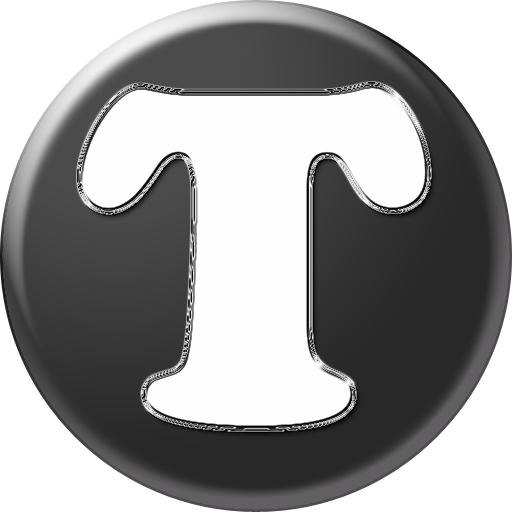
<style>
.page{position:relative;width:512px;height:512px;background:#fefefe}
.page>*{position:absolute;margin:0}
.t1{font:500px "CooperBlack";color:#000000}
</style>
<div class="page">
<p class="t1" style="left:78px;top:84px;width:352px;height:347px">T</p>
</div>
